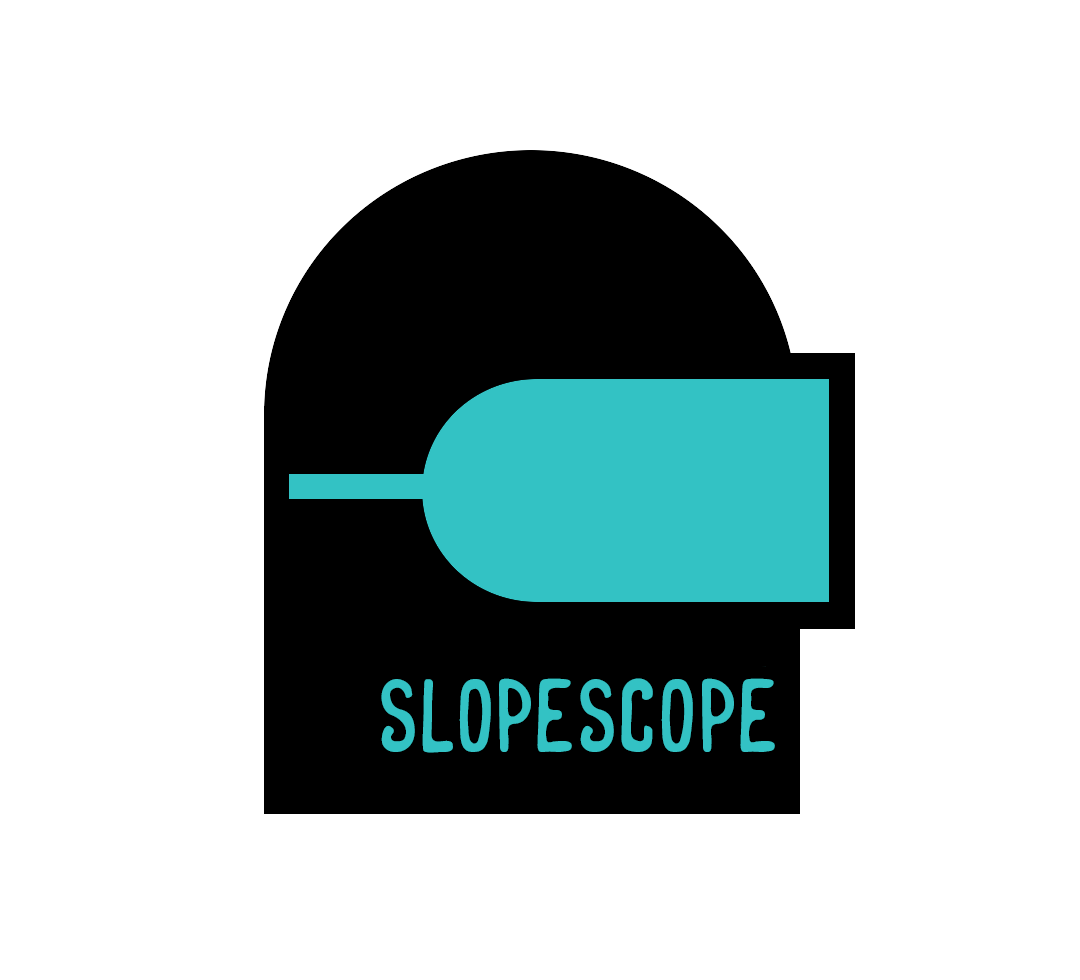
<style>
.page{position:relative;width:1080px;height:980px;background:#ffffff}
.page>*{position:absolute;margin:0}
.t1{font:100px "Norquay-Regular";color:#33c2c4}
</style>
<div class="page">
<p class="t1" style="left:381px;top:678px;width:394px;height:75px">SlopeScope</p>
</div>
